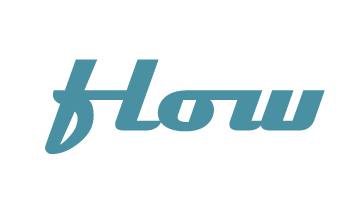
<style>
.page{position:relative;width:360px;height:216px;background:#ffffff}
.page>*{position:absolute;margin:0}
.t1{font:120px "Magneto-Bold";color:#4990a2}
</style>
<div class="page">
<p class="t1" style="left:45px;top:59px;width:280px;height:95px">flow</p>
</div>
